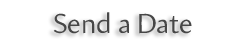
<style>
.page{position:relative;width:246px;height:48px;background:#ffffff}
.page>*{position:absolute;margin:0}
.t1{font:28px "Amira-Roman";color:#474747}
</style>
<div class="page">
<p class="t1" style="left:53px;top:12px;width:139px;height:22px">Send a Date</p>
</div>
